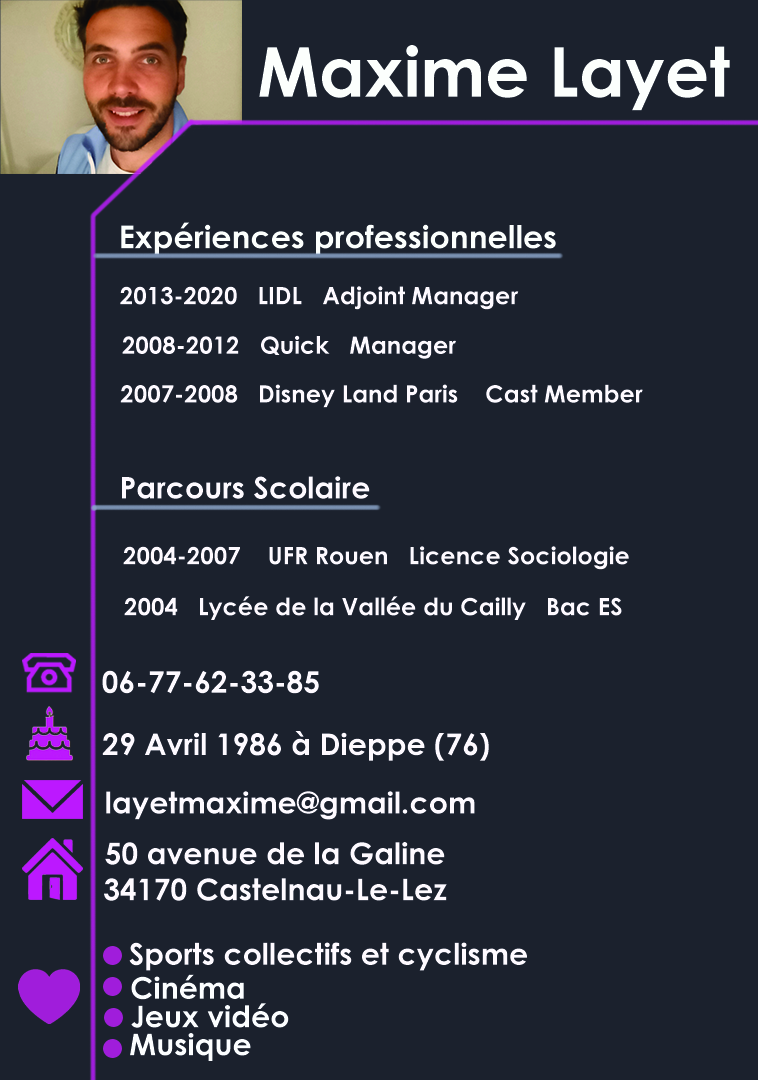
<style>
.page{position:relative;width:758px;height:1080px;background:#1b212d}
.page>*{position:absolute;margin:0}
.t1{font:69.1px "CenturyGothic-Bold";color:#fcfffd}
.t2{font:24px "CenturyGothic-Bold";color:#fefaff}
.t3{font:30px "CenturyGothic-Bold";color:#fefaff}
.t4{font:30px "CenturyGothic-Bold";color:#fcfeff}
</style>
<div class="page">
<p class="t1" style="left:259px;top:45px;width:471px;height:66px">Maxime Layet</p>
<p class="t2" style="left:120px;top:286px;width:399px;height:24px">2013-2020   LIDL   Adjoint Manager</p>
<p class="t2" style="left:122px;top:335px;width:334px;height:24px">2008-2012   Quick   Manager</p>
<p class="t2" style="left:120px;top:384px;width:523px;height:24px">2007-2008   Disney Land Paris    Cast Member</p>
<p class="t2" style="left:123px;top:546px;width:506px;height:24px">2004-2007    UFR Rouen   Licence Sociologie</p>
<p class="t2" style="left:124px;top:596px;width:498px;height:24px">2004   Lycée de la Vallée du Cailly   Bac ES</p>
<p class="t3" style="left:102px;top:670px;width:217px;height:24px">06-77-62-33-85</p>
<p class="t3" style="left:102px;top:731px;width:387px;height:30px">29 Avril 1986 à Dieppe (76)</p>
<p class="t3" style="left:106px;top:791px;width:369px;height:29px">layetmaxime@gmail.com</p>
<p class="t3" style="left:104px;top:842px;width:343px;height:59px;text-align:center">50 avenue de la Galine<br>34170 Castelnau-Le-Lez</p>
<p class="t3" style="left:129px;top:942px;width:398px;height:29px">Sports collectifs et cyclisme</p>
<p class="t4" style="left:131px;top:974px;width:113px;height:26px">Cinéma</p>
<p class="t4" style="left:131px;top:1003px;width:158px;height:25px">Jeux vidéo</p>
<p class="t4" style="left:130px;top:1033px;width:121px;height:28px">Musique</p>
</div>
